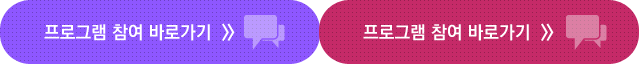
<style>
.page{position:relative;width:640px;height:64px;background:#c52a68}
.page>*{position:absolute;margin:0}
.t1{font:18px "KoPubDotumBold";color:#ffffff}
.t2{font:18px "KoPubDotumBold";letter-spacing:-0.12em;color:#ffffff}
</style>
<div class="page">
<p class="t1" style="left:44px;top:23px;width:191px;height:18px">프로그램 참여 바로가기  <span class="t2">&gt;&gt;</span></p>
<p class="t1" style="left:363px;top:23px;width:191px;height:18px">프로그램 참여 바로가기  <span class="t2">&gt;&gt;</span></p>
</div>
